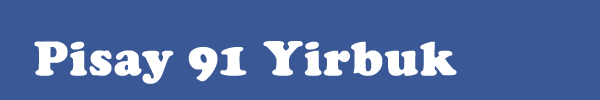
<style>
.page{position:relative;width:600px;height:100px;background:#3a5896}
.page>*{position:absolute;margin:0}
.t1{font:50px "CooperBlack";color:#ffffff;font-weight:bold}
</style>
<div class="page">
<p class="t1" style="left:34px;top:41px;width:423px;height:43px">Pisay 91 Yirbuk</p>
</div>
